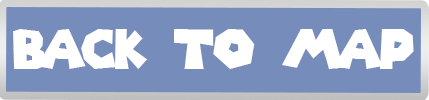
<style>
.page{position:relative;width:429px;height:100px;background:#768cbb}
.page>*{position:absolute;margin:0}
.t1{font:54px "SuperMarioGalaxy";color:#ffffff}
</style>
<div class="page">
<p class="t1" style="left:13px;top:29px;width:401px;height:40px">back to map</p>
</div>
